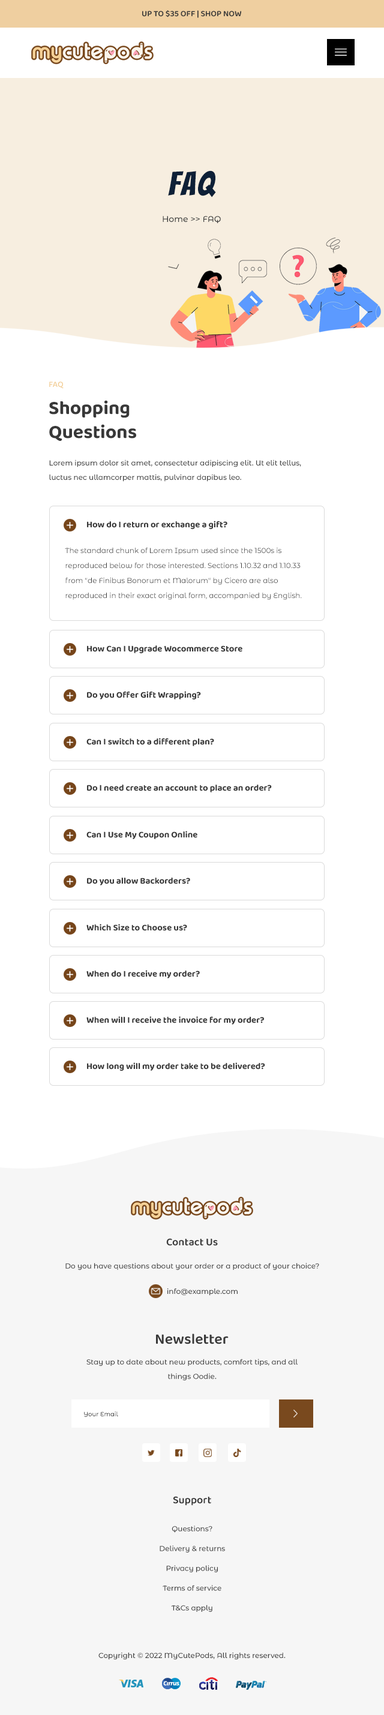
<style>
.page{position:relative;width:384px;height:1715px;background:#ffffff}
.page>*{position:absolute;margin:0}
.t1{font:8.4px "Baloo2-SemiBold";color:#383838}
.t2{font:33px "Bangers-Regular";letter-spacing:0.06em;color:#0e2037}
.t3{font:8.4px "MontserratAlternates-Medium";color:#3d3d3d}
.t4{font:8.4px "Baloo2-Medium";color:#f2cd93}
.t5{font:19.2px/24px "Baloo2-Bold";color:#383838}
.t6{font:7.2px/14.4px "MontserratAlternates-Medium";color:#3d3d3d}
.t7{font:9px "Baloo2-Bold";color:#383838}
.t8{font:7.2px/15px "MontserratAlternates-Regular";color:#3d3d3d}
.t9{font:10.8px "Baloo2-SemiBold";color:#383838}
.t10{font:7.2px "MontserratAlternates-Medium";color:#3d3d3d}
.t11{font:15px "Baloo2-SemiBold";color:#383838}
.t12{font:6px "MontserratAlternates-Medium";color:#3d3d3d}
.t13{font:7.2px/19.8px "MontserratAlternates-Medium";color:#3d3d3d}
.t14{font:7.2px "MontserratAlternates-Medium";color:#383838}
</style>
<div class="page">
<p class="t1" style="left:142px;top:10px;width:99px;height:8px">UP TO $35 OFF | SHOP NOW</p>
<p class="t2" style="left:168px;top:170px;width:48px;height:27px">FAQ</p>
<p class="t3" style="left:163px;top:216px;width:58px;height:7px">Home &gt;&gt; FAQ</p>
<p class="t4" style="left:49px;top:382px;width:15px;height:7px">FAQ</p>
<p class="t5" style="left:49px;top:400px;width:87px;height:41px">Shopping<br>Questions</p>
<p class="t6" style="left:49px;top:460px;width:252px;height:22px">Lorem ipsum dolor sit amet, consectetur adipiscing elit. Ut elit tellus, luctus nec ullamcorper mattis, pulvinar dapibus leo.</p>
<p class="t7" style="left:87px;top:521px;width:140px;height:8px">How do I return or exchange a gift?</p>
<p class="t8" style="left:65px;top:548px;width:237px;height:52px">The standard chunk of Lorem Ipsum used since the 1500s is reproduced below for those interested. Sections 1.10.32 and 1.10.33 from "de Finibus Bonorum et Malorum" by Cicero are also reproduced in their exact original form, accompanied by English.</p>
<p class="t7" style="left:87px;top:646px;width:155px;height:7px">How Can I Upgrade Wocommerce Store</p>
<p class="t7" style="left:87px;top:691px;width:114px;height:9px">Do you Offer Gift Wrapping?</p>
<p class="t7" style="left:86px;top:738px;width:128px;height:8px">Can I switch to a different plan?</p>
<p class="t7" style="left:87px;top:785px;width:185px;height:8px">Do I need create an account to place an order?</p>
<p class="t7" style="left:86px;top:831px;width:111px;height:8px">Can I Use My Coupon Online</p>
<p class="t7" style="left:87px;top:878px;width:103px;height:8px">Do you allow Backorders?</p>
<p class="t7" style="left:86px;top:924px;width:101px;height:7px">Which Size to Choose us?</p>
<p class="t7" style="left:86px;top:970px;width:114px;height:9px">When do I receive my order?</p>
<p class="t7" style="left:86px;top:1016px;width:178px;height:9px">When will I receive the invoice for my order?</p>
<p class="t7" style="left:87px;top:1063px;width:178px;height:8px">How long will my order take to be delivered?</p>
<p class="t9" style="left:166px;top:1238px;width:52px;height:8px">Contact Us</p>
<p class="t10" style="left:65px;top:1263px;width:254px;height:7px">Do you have questions about your order or a product of your choice?</p>
<p class="t10" style="left:167px;top:1288px;width:71px;height:8px">info@example.com</p>
<p class="t11" style="left:156px;top:1334px;width:73px;height:11px">Newsletter</p>
<p class="t6" style="left:86px;top:1359px;width:212px;height:22px;text-align:center">Stay up to date about new products, comfort tips, and all things Oodie.</p>
<p class="t12" style="left:84px;top:1412px;width:34px;height:5px">Your Email</p>
<p class="t9" style="left:173px;top:1496px;width:38px;height:10px">Support</p>
<p class="t13" style="left:160px;top:1526px;width:65px;height:86px;text-align:center">Questions?<br>Delivery &amp; returns<br>Privacy policy<br>Terms of service<br>T&amp;Cs apply</p>
<p class="t14" style="left:98px;top:1652px;width:188px;height:8px">Copyright © 2022 MyCutePods, All rights reserved.</p>
</div>
